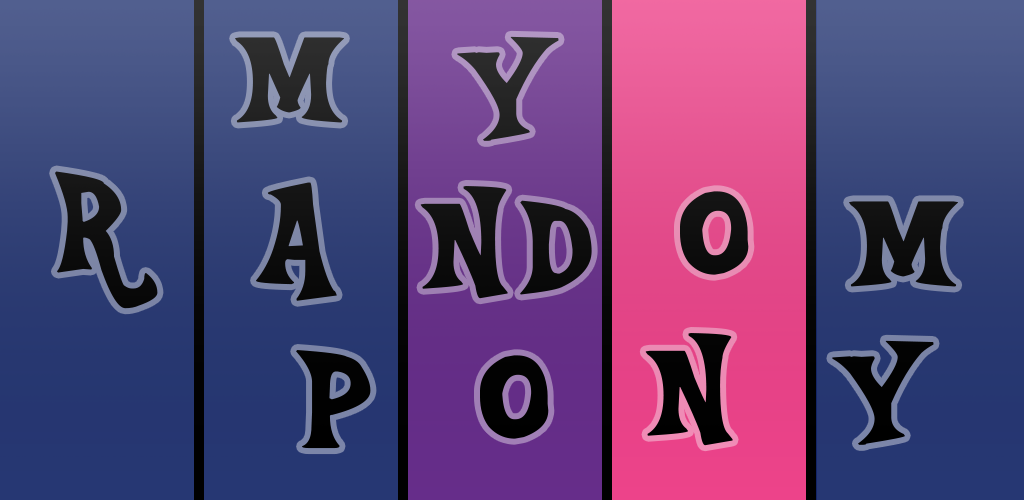
<style>
.page{position:relative;width:1024px;height:500px}
.page>*{position:absolute;margin:0}
.t1{font:200px "Equestria";color:#282828}
.t2{font:200px "Equestria";color:#000000}
</style>
<div class="page">
<p class="t1" style="left:235px;top:37px;width:109px;height:86px">m</p>
<p class="t1" style="left:457px;top:36px;width:102px;height:105px">y</p>
<p class="t2" style="left:55px;top:171px;width:103px;height:138px">r</p>
<p class="t2" style="left:256px;top:182px;width:81px;height:119px">a</p>
<p class="t2" style="left:420px;top:186px;width:88px;height:113px">n</p>
<p class="t2" style="left:680px;top:191px;width:69px;height:84px">O</p>
<p class="t2" style="left:520px;top:200px;width:72px;height:95px">d</p>
<p class="t2" style="left:849px;top:201px;width:109px;height:86px">m</p>
<p class="t2" style="left:645px;top:333px;width:88px;height:113px">n</p>
<p class="t2" style="left:832px;top:340px;width:102px;height:105px">y</p>
<p class="t2" style="left:296px;top:350px;width:75px;height:99px">p</p>
<p class="t2" style="left:480px;top:355px;width:69px;height:84px">O</p>
</div>
